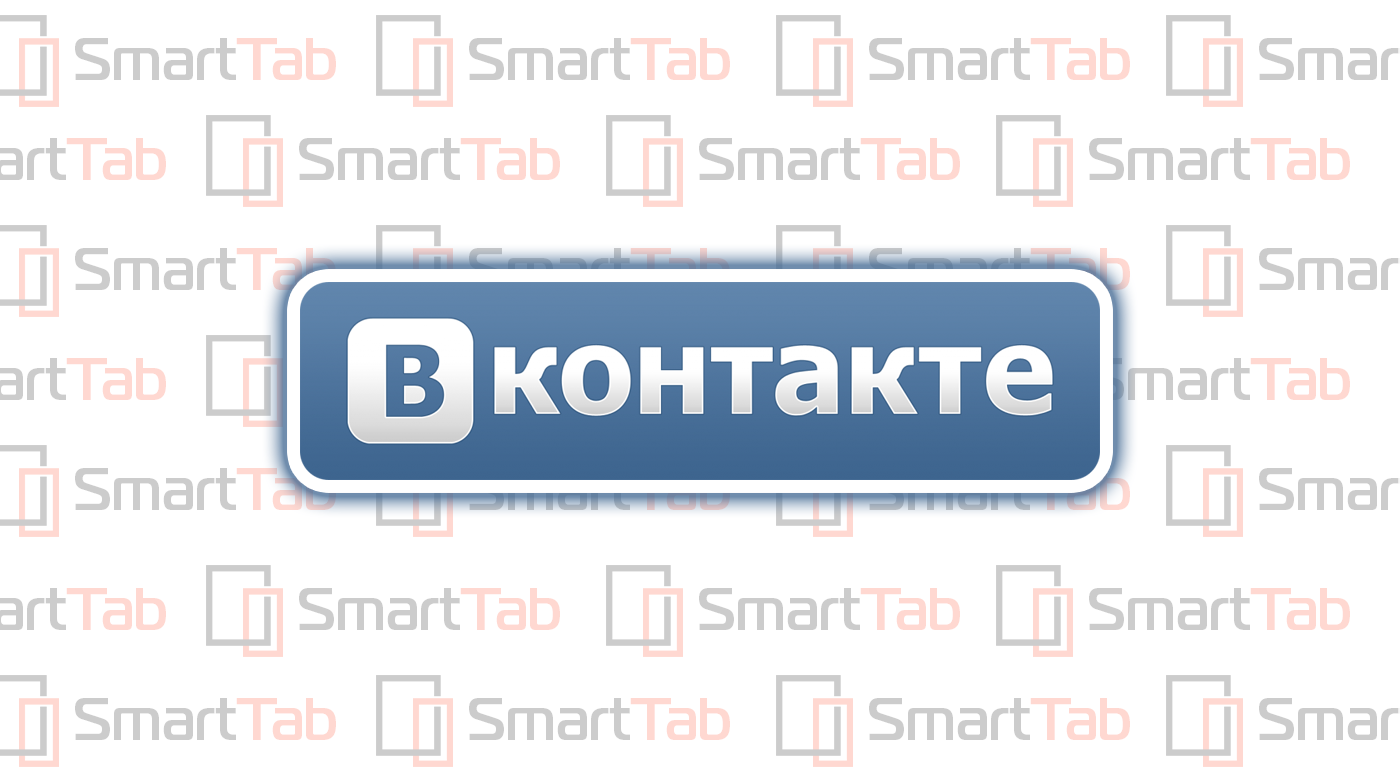
<style>
.page{position:relative;width:1400px;height:780px;background:#ffffff}
.page>*{position:absolute;margin:0}
.t1{font:60px "MagistralC-Bold"}
</style>
<div class="page">
<p class="t1" style="left:75px;top:38px;width:261px;height:42px">SmartTab</p>
<p class="t1" style="left:469px;top:38px;width:261px;height:42px">SmartTab</p>
<p class="t1" style="left:869px;top:38px;width:261px;height:42px">SmartTab</p>
<p class="t1" style="left:299px;top:138px;width:261px;height:42px">SmartTab</p>
<p class="t1" style="left:699px;top:138px;width:261px;height:42px">SmartTab</p>
<p class="t1" style="left:1089px;top:138px;width:261px;height:42px">SmartTab</p>
<p class="t1" style="left:75px;top:248px;width:261px;height:42px">SmartTab</p>
<p class="t1" style="left:1089px;top:358px;width:261px;height:42px">SmartTab</p>
<p class="t1" style="left:75px;top:468px;width:261px;height:42px">SmartTab</p>
<p class="t1" style="left:299px;top:588px;width:261px;height:42px">SmartTab</p>
<p class="t1" style="left:699px;top:588px;width:261px;height:42px">SmartTab</p>
<p class="t1" style="left:1089px;top:588px;width:261px;height:42px">SmartTab</p>
<p class="t1" style="left:75px;top:698px;width:261px;height:42px">SmartTab</p>
<p class="t1" style="left:469px;top:698px;width:261px;height:42px">SmartTab</p>
<p class="t1" style="left:869px;top:698px;width:261px;height:42px">SmartTab</p>
</div>
